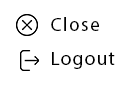
<style>
.page{position:relative;width:125px;height:85px;background:#ffffff}
.page>*{position:absolute;margin:0}
.t1{font:19.1px "MyriadPro-Regular";letter-spacing:0.08em;color:#000000}
</style>
<div class="page">
<p class="t1" style="left:51px;top:17px;width:48px;height:14px">Close</p>
<p class="t1" style="left:52px;top:52px;width:63px;height:17px">Logout</p>
</div>
